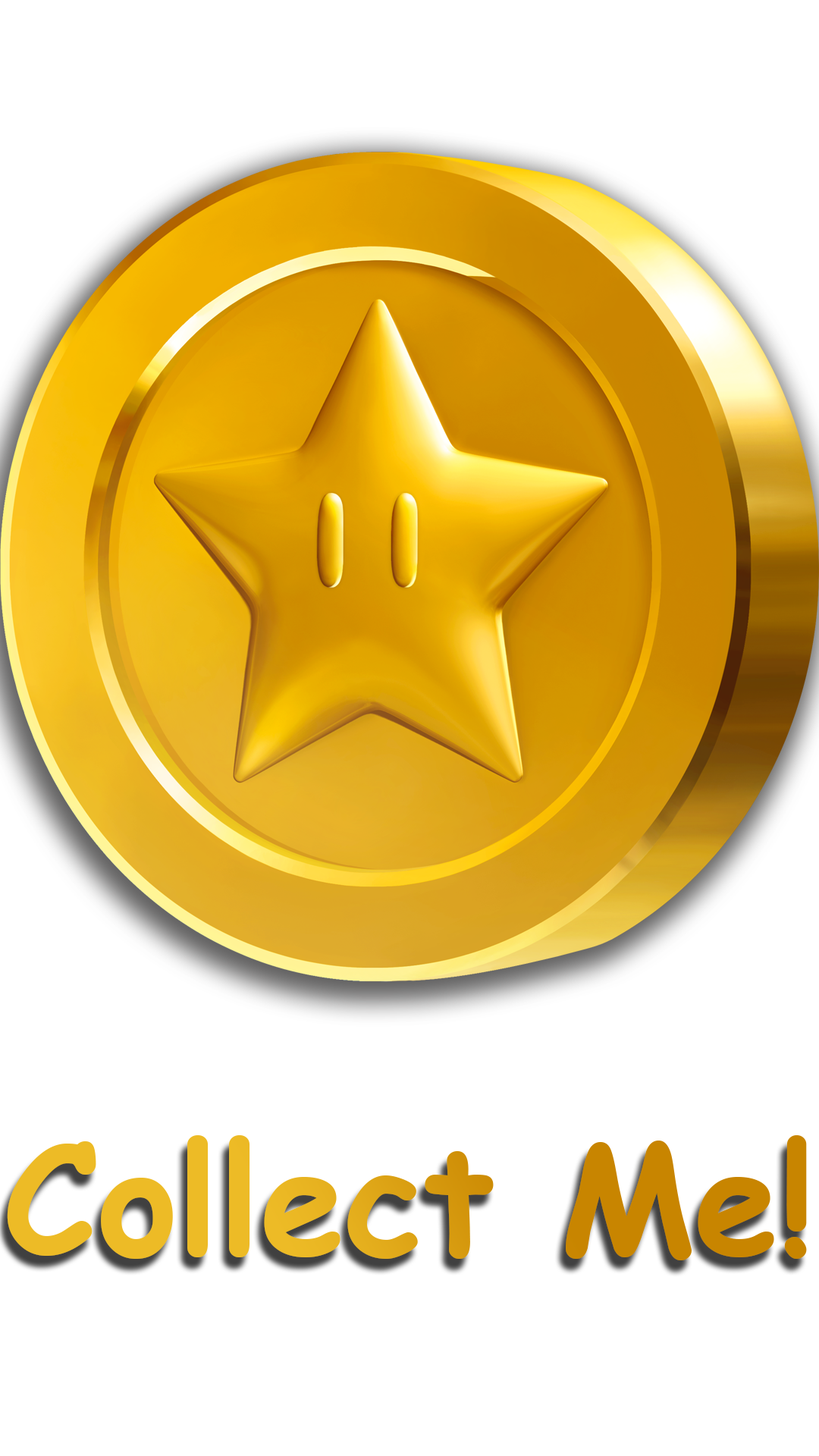
<style>
.page{position:relative;width:819px;height:1456px;background:#ffffff}
.page>*{position:absolute;margin:0}
.t1{font:151.7px "ComicSansMS-Bold"}
</style>
<div class="page">
<p class="t1" style="left:7px;top:1135px;width:800px;height:125px">Collect Me!</p>
</div>
